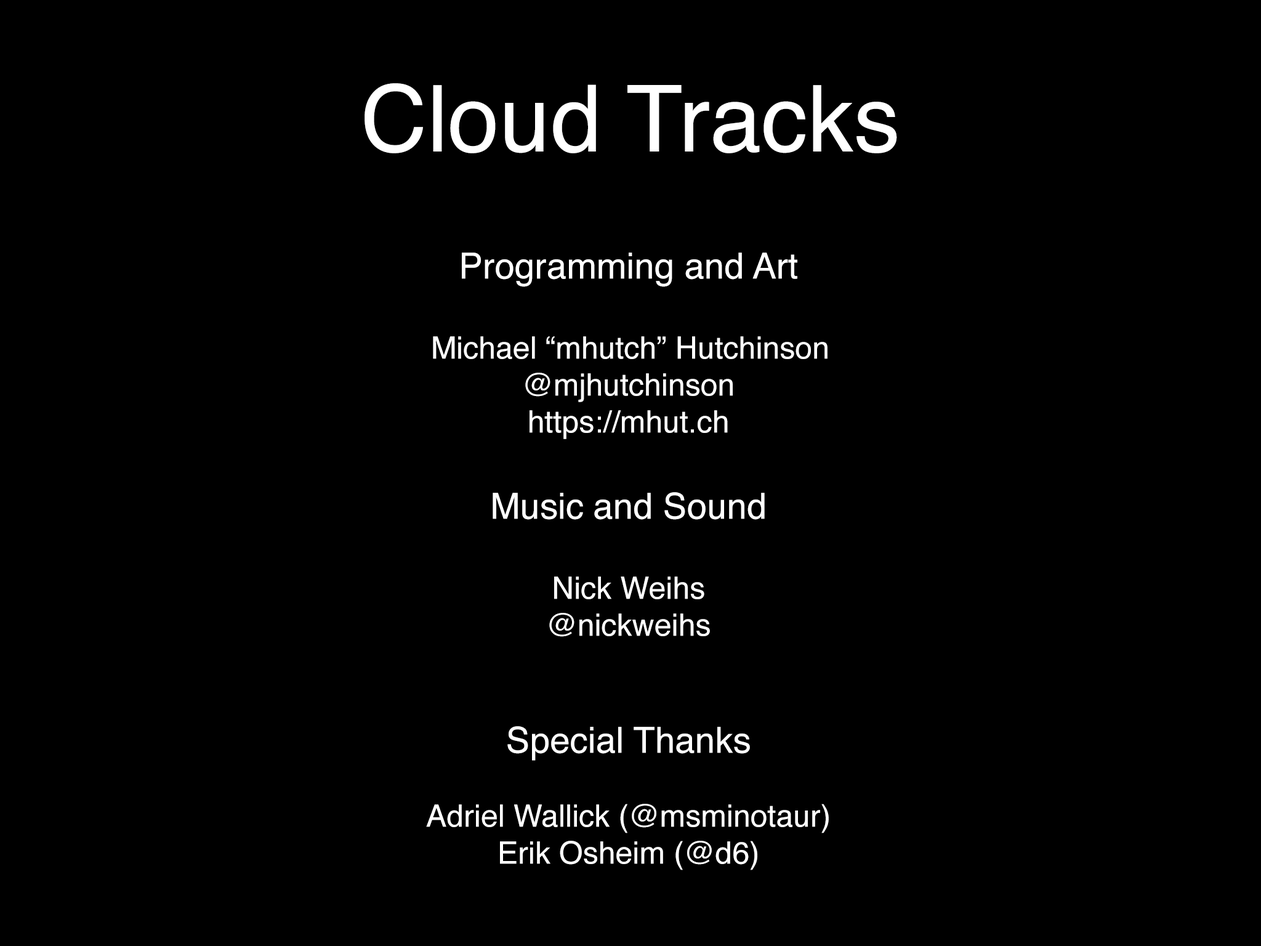
<style>
.page{position:relative;width:1261px;height:946px;background:#000000}
.page>*{position:absolute;margin:0}
.t1{font:92.4px "Helvetica";color:#ffffff}
.t2{font:30.8px "Helvetica";color:#ffffff}
.t3{font:35.9px "Helvetica";color:#ffffff}
</style>
<div class="page">
<p class="t1" style="left:364px;top:83px;width:533px;height:70px">Cloud Tracks</p>
<p class="t2" style="left:426px;top:252px;width:403px;height:618px;text-align:center"><span class="t3">Programming and Art<br><br></span>Michael “mhutch” Hutchinson<br>@mjhutchinson<br>https://mhut.ch<br><span class="t3"><br>Music and Sound<br><br></span>Nick Weihs<br>@nickweihs<br><br><br><span class="t3">Special Thanks<br></span><br>Adriel Wallick (@msminotaur)<br>Erik Osheim (@d6)</p>
</div>
